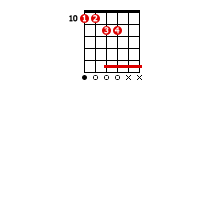
<style>
.page{position:relative;width:200px;height:200px;background:#ffffff}
.page>*{position:absolute;margin:0}
.t1{font:8px "Tahoma";color:#000000;font-weight:bold}
.t2{font:8px "Tahoma";color:#ffffff;font-weight:bold}
.t3{font:8px "Tahoma";font-weight:bold}
</style>
<div class="page">
<p class="t1" style="left:69px;top:15px;width:9px;height:7px">10</p>
<p class="t2" style="left:82px;top:15px;width:5px;height:7px">1</p>
<p class="t2" style="left:93px;top:15px;width:5px;height:7px">2</p>
<p class="t3" style="left:104px;top:27px;width:5px;height:7px">3</p>
<p class="t2" style="left:114px;top:27px;width:6px;height:7px">4</p>
</div>
